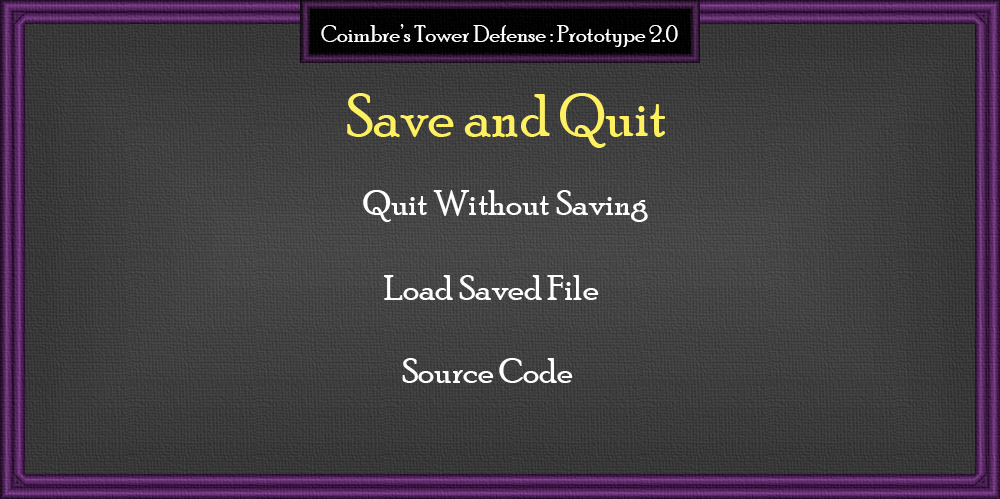
<style>
.page{position:relative;width:1000px;height:499px}
.page>*{position:absolute;margin:0}
.t1{font:24px "PoorRichard-Regular";color:#ffffff}
.t2{font:60px "PoorRichard-Regular";color:#fef161}
.t3{font:36px "PoorRichard-Regular";color:#ffffff}
</style>
<div class="page">
<p class="t1" style="left:321px;top:24px;width:357px;height:23px">Coimbre’s Tower Defense : Prototype 2.0</p>
<p class="t2" style="left:347px;top:93px;width:318px;height:55px">Save and Quit</p>
<p class="t3" style="left:363px;top:190px;width:285px;height:32px">Quit Without Saving</p>
<p class="t3" style="left:384px;top:275px;width:215px;height:25px">Load Saved File</p>
<p class="t3" style="left:402px;top:358px;width:171px;height:25px">Source Code</p>
</div>
